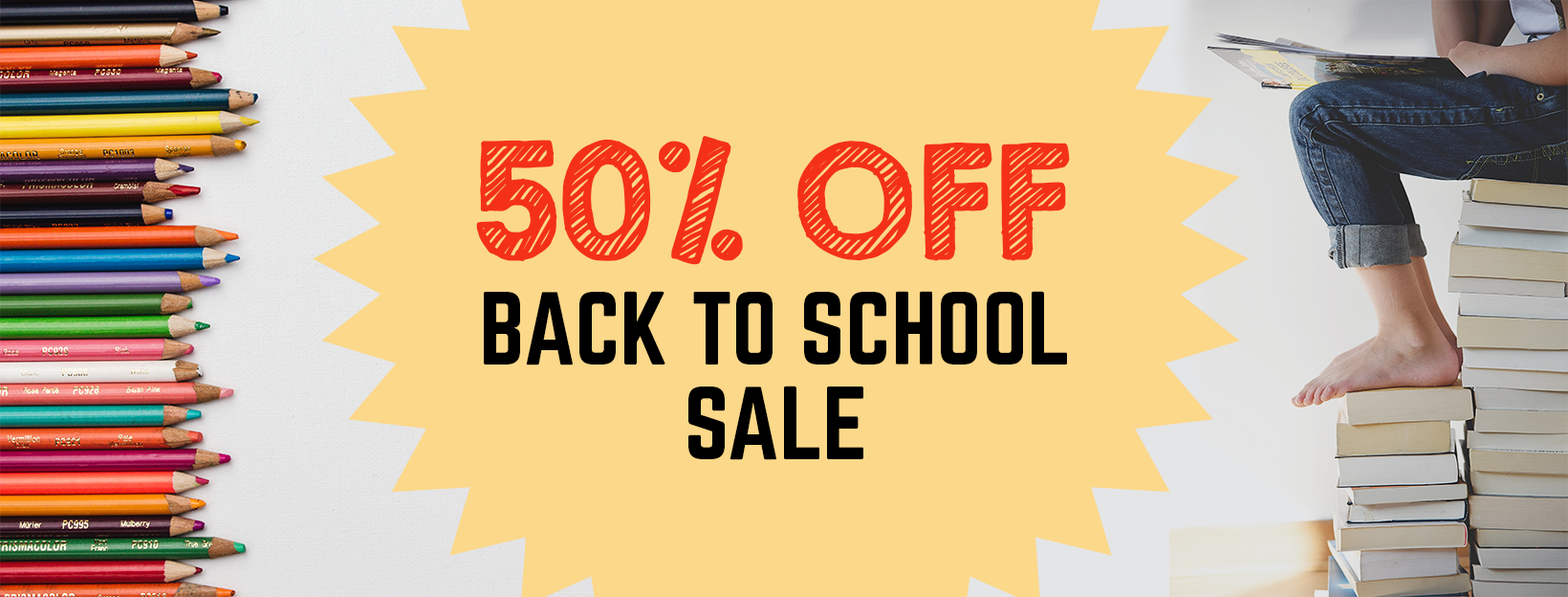
<style>
.page{position:relative;width:1568px;height:597px;background:#fbd88a}
.page>*{position:absolute;margin:0}
.t1{font:141px "KGSecondChancesSketch";color:#f43118;font-weight:bold}
.t2{font:91px/94.9px "Norwester-Regular";color:#000000}
</style>
<div class="page">
<p class="t1" style="left:476px;top:136px;width:594px;height:129px">50% OFF</p>
<p class="t2" style="left:484px;top:291px;width:583px;height:169px;text-align:center">BACK TO SCHOOL<br>SALE</p>
</div>
